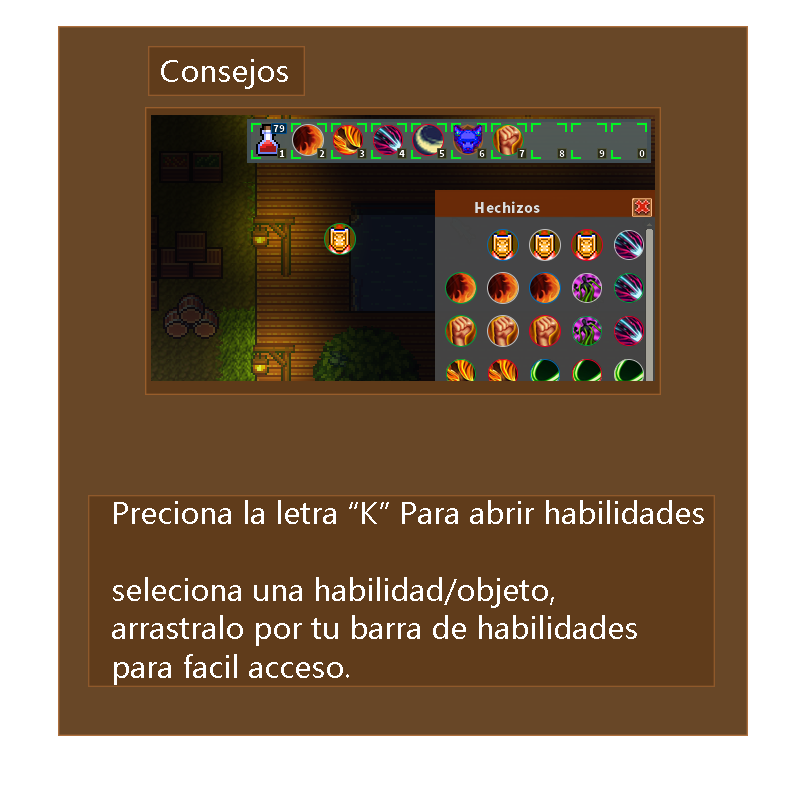
<style>
.page{position:relative;width:800px;height:800px;background:#684727}
.page>*{position:absolute;margin:0}
.t1{font:32px "Ebrima";color:#ffffff}
</style>
<div class="page">
<p class="t1" style="left:161px;top:59px;width:127px;height:30px">Consejos</p>
<p class="t1" style="left:112px;top:500px;width:592px;height:185px">Preciona la letra “K” Para abrir habilidades<br><br>seleciona una habilidad/objeto,<br>arrastralo por tu barra de habilidades<br>para facil acceso.</p>
</div>
